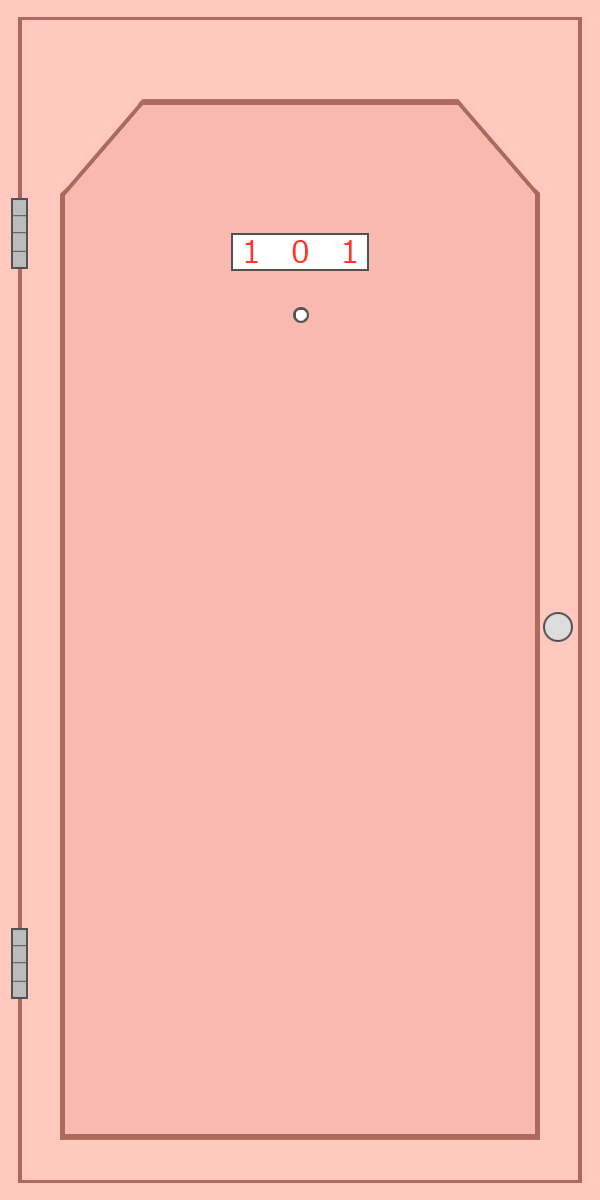
<style>
.page{position:relative;width:600px;height:1200px;background:#f8bab0}
.page>*{position:absolute;margin:0}
.t1{font:30px "Meiryo";color:#ff362a}
</style>
<div class="page">
<p class="t1" style="left:245px;top:240px;width:112px;height:23px">1   0   1</p>
</div>
